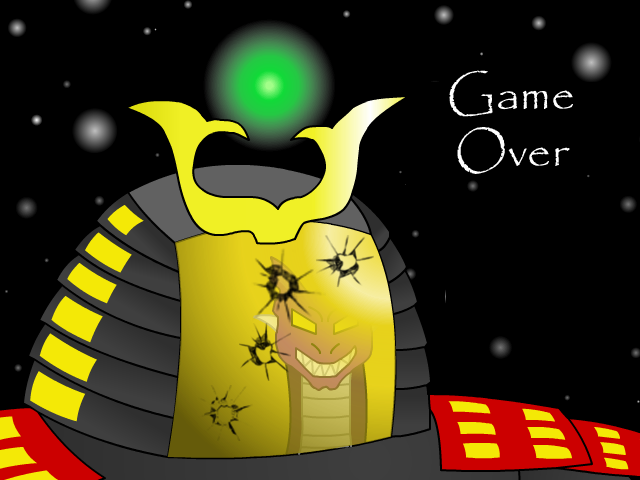
<style>
.page{position:relative;width:640px;height:480px;background:#000000}
.page>*{position:absolute;margin:0}
.t1{font:47.8px "Papyrus-Regular";color:#ffffff}
</style>
<div class="page">
<p class="t1" style="left:449px;top:70px;width:124px;height:104px;text-align:center">Game <br>Over</p>
</div>
